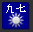
<style>
.page{position:relative;width:33px;height:32px;background:#000090}
.page>*{position:absolute;margin:0}
.t1{font:10.4px "SimSun";color:#ffffff}
</style>
<div class="page">
<p class="t1" style="left:6px;top:4px;width:20px;height:9px">九七</p>
</div>
